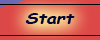
<style>
.page{position:relative;width:100px;height:40px}
.page>*{position:absolute;margin:0}
.t1{font:15px "ComicSansMS-Bold";color:#040736;font-style:italic;scale:1.2 1}
</style>
<div class="page">
<p class="t1" style="left:25px;top:13px;width:50px;height:11px">Start</p>
</div>
